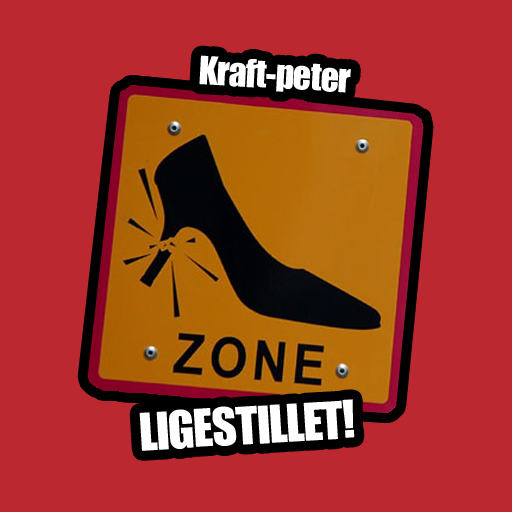
<style>
.page{position:relative;width:512px;height:512px;background:#bc282f}
.page>*{position:absolute;margin:0}
.t1{font:36px "Impact";letter-spacing:-0.025em;color:#ffffff}
.t2{font:48px "Impact";letter-spacing:-0.025em;color:#ffffff}
</style>
<div class="page">
<p class="t1" style="left:199px;top:55px;width:152px;height:38px;rotate:3deg">Kraft-peter</p>
<p class="t2" style="left:139px;top:399px;width:216px;height:52px;rotate:-3deg">LIGESTILLET!</p>
</div>
